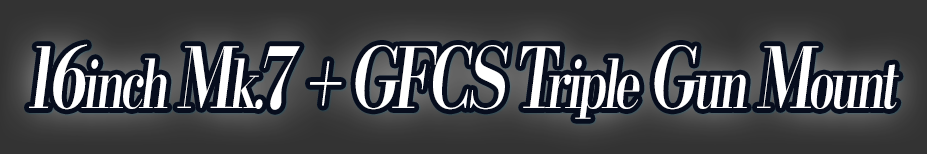
<style>
.page{position:relative;width:927px;height:154px}
.page>*{position:absolute;margin:0}
.t1{font:84px "KochoStd-Heavy";letter-spacing:-0.08em;color:#ffffff;font-style:italic;scale:0.71 1}
.t2{font:67.2px "KochoStd-Heavy";letter-spacing:-0.08em;color:#ffffff;font-style:italic;scale:0.71 1}
</style>
<div class="page">
<p class="t1" style="left:29px;top:44px;width:870px;height:75px">16<span class="t2">inch </span>M<span class="t2">k.</span>7 <span class="t2">+ </span>GFCS T<span class="t2">riple </span>G<span class="t2">un </span>M<span class="t2">ount</span></p>
</div>
